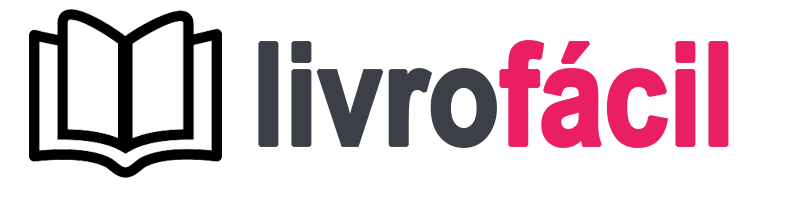
<style>
.page{position:relative;width:800px;height:200px;background:#ffffff}
.page>*{position:absolute;margin:0}
.t1{font:142px "ArialNarrow-Bold";letter-spacing:-0.025em;color:#3c3f48;font-weight:bold}
.t2{font:142px "ArialNarrow-Bold";letter-spacing:-0.025em;color:#e91e63;font-weight:bold}
</style>
<div class="page">
<p class="t1" style="left:258px;top:40px;width:471px;height:108px">livro<span class="t2">fácil</span></p>
</div>
